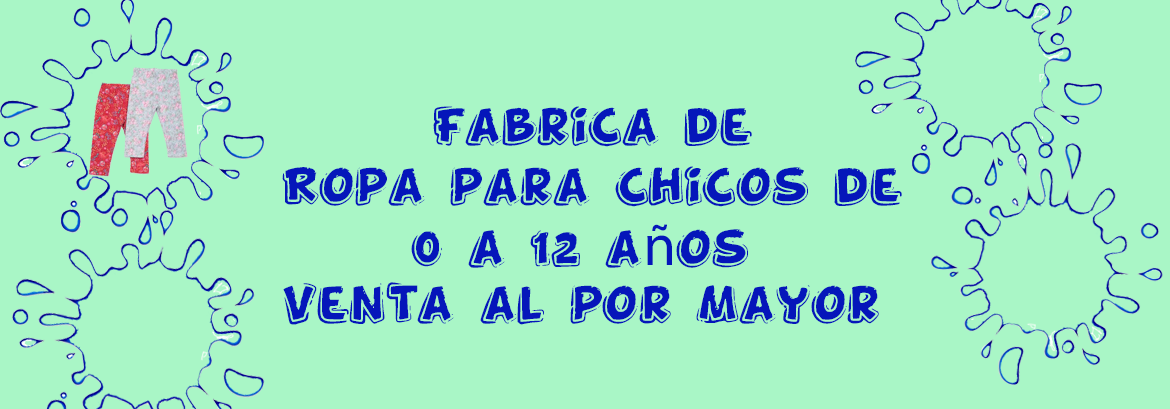
<style>
.page{position:relative;width:1170px;height:409px;background:#a9f6c6}
.page>*{position:absolute;margin:0}
.t1{font:60px "FunnyKid";color:#0516ba}
.t2{font:60px "MyriadPro-Regular";color:#0516ba}
</style>
<div class="page">
<p class="t1" style="left:433px;top:106px;width:319px;height:41px">Fabrica de</p>
<p class="t1" style="left:282px;top:166px;width:620px;height:41px">Ropa para chicos de</p>
<p class="t1" style="left:411px;top:224px;width:337px;height:44px">0 a 12 a<span class="t2">ñ</span>os</p>
<p class="t1" style="left:283px;top:282px;width:596px;height:43px">Venta al por Mayor</p>
</div>
